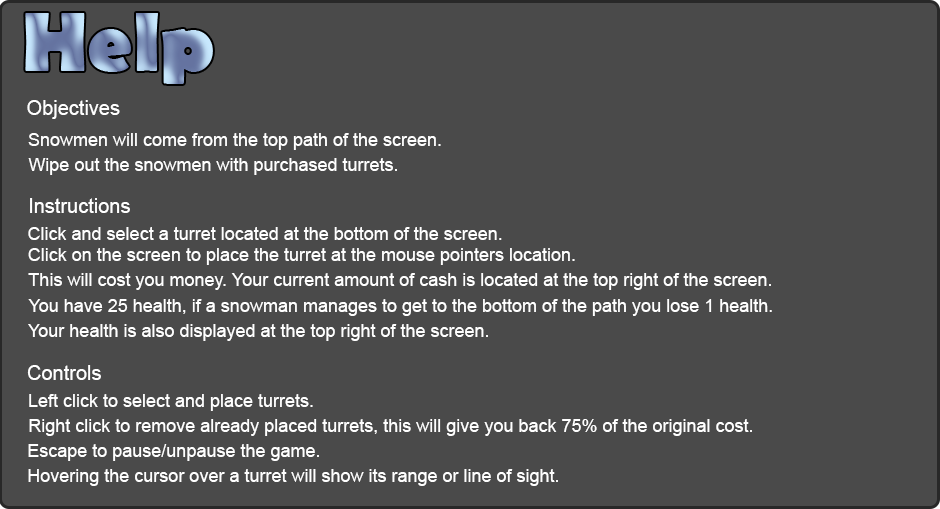
<style>
.page{position:relative;width:940px;height:509px;background:#4a4a4a}
.page>*{position:absolute;margin:0}
.t1{font:20px "ArialMT";color:#ffffff}
.t2{font:18px "ArialMT";color:#ffffff}
</style>
<div class="page">
<p class="t1" style="left:27px;top:100px;width:93px;height:19px">Objectives</p>
<p class="t2" style="left:28px;top:133px;width:413px;height:17px">Snowmen will come from the top path of the screen.</p>
<p class="t2" style="left:28px;top:158px;width:369px;height:17px">Wipe out the snowmen with purchased turrets.</p>
<p class="t1" style="left:30px;top:198px;width:100px;height:15px">Instructions</p>
<p class="t2" style="left:28px;top:227px;width:474px;height:13px">Click and select a turret located at the bottom of the screen.</p>
<p class="t2" style="left:28px;top:248px;width:547px;height:17px">Click on the screen to place the turret at the mouse pointers location.</p>
<p class="t2" style="left:28px;top:273px;width:743px;height:17px">This will cost you money. Your current amount of cash is located at the top right of the screen.</p>
<p class="t2" style="left:28px;top:299px;width:744px;height:17px">You have 25 health, if a snowman manages to get to the bottom of the path you lose 1 health.</p>
<p class="t2" style="left:28px;top:324px;width:460px;height:17px">Your health is also displayed at the top right of the screen.</p>
<p class="t1" style="left:27px;top:365px;width:74px;height:15px">Controls</p>
<p class="t2" style="left:29px;top:394px;width:284px;height:17px">Left click to select and place turrets.</p>
<p class="t2" style="left:29px;top:419px;width:723px;height:17px">Right click to remove already placed turrets, this will give you back 75% of the original cost.</p>
<p class="t2" style="left:28px;top:444px;width:291px;height:17px">Escape to pause/unpause the game.</p>
<p class="t2" style="left:28px;top:469px;width:530px;height:17px">Hovering the cursor over a turret will show its range or line of sight.</p>
</div>
